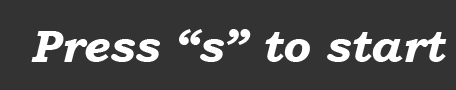
<style>
.page{position:relative;width:456px;height:90px;background:#333333}
.page>*{position:absolute;margin:0}
.t1{font:45.8px "BookmanOldStyle-BoldItalic";color:#ffffff}
</style>
<div class="page">
<p class="t1" style="left:31px;top:29px;width:416px;height:33px">Press “s” to start</p>
</div>
